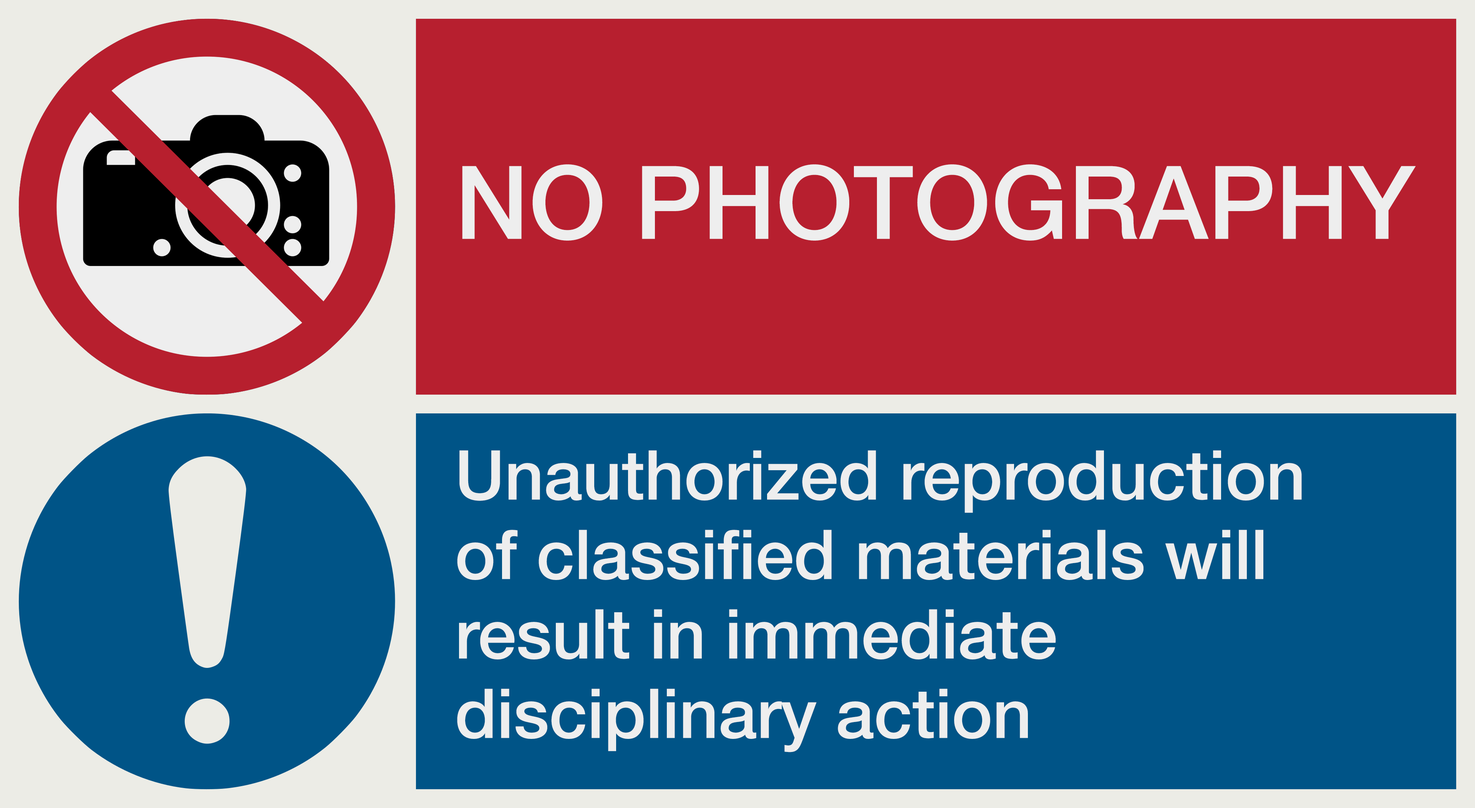
<style>
.page{position:relative;width:1475px;height:808px;background:#005487}
.page>*{position:absolute;margin:0}
.t1{font:101.8px "HelveticaNeue-Medium";color:#eeeeee}
.t2{font:68.8px/79.5px "HelveticaNeue-Medium";color:#eeeeee}
</style>
<div class="page">
<p class="t1" style="left:462px;top:164px;width:954px;height:77px">NO PHOTOGRAPHY</p>
<p class="t2" style="left:457px;top:451px;width:845px;height:302px">Unauthorized reproduction<br>of classified materials will<br>result in immediate disciplinary action</p>
</div>
